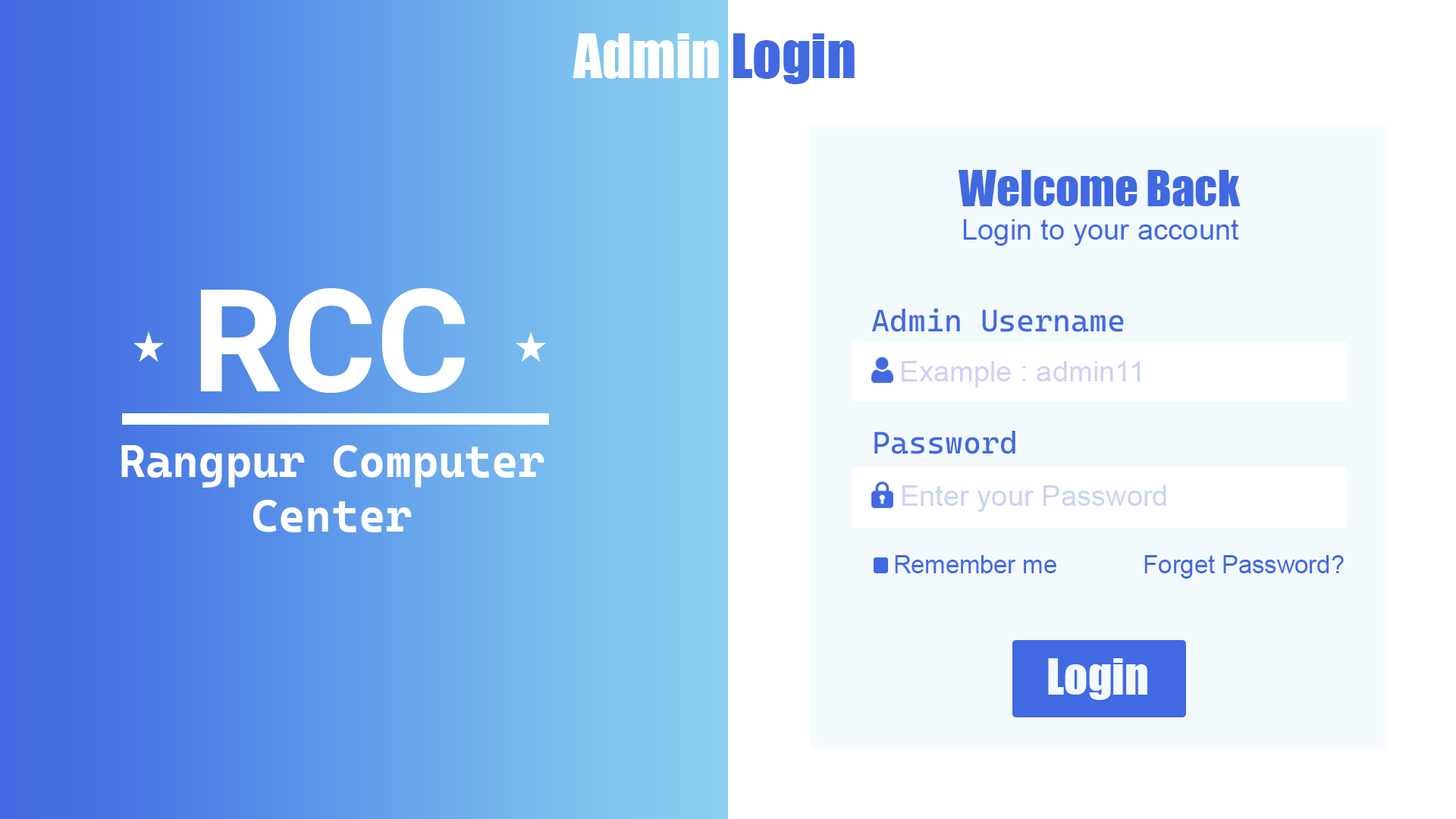
<style>
.page{position:relative;width:1456px;height:819px;background:#ffffff}
.page>*{position:absolute;margin:0}
.t1{font:46.1px "Impact";color:#4169e1}
.t2{font:29px "ArialMT";color:#4169e1}
.t3{font:142.8px "Roboto-Bold";color:#ffffff}
.t4{font:31px "CascadiaCode-Roman";color:#4169e1}
.t5{font:28.9px "ArialMT";color:#cad3f5}
.t6{font:45.4px "CascadiaCodeRoman-Bold";color:#ffffff}
.t7{font:24.8px "ArialMT";color:#4169e1}
.t8{font:46.4px "Impact";color:#f3fafd}
</style>
<div class="page">
<p class="t1" style="left:959px;top:170px;width:282px;height:36px">Welcome Back</p>
<p class="t2" style="left:963px;top:219px;width:276px;height:27px">Login to your account</p>
<p class="t3" style="left:200px;top:288px;width:266px;height:105px">RCC</p>
<p class="t4" style="left:872px;top:308px;width:252px;height:24px">Admin Username</p>
<p class="t5" style="left:902px;top:361px;width:239px;height:27px">Example : admin11</p>
<p class="t4" style="left:874px;top:431px;width:141px;height:23px">Password</p>
<p class="t6" style="left:121px;top:445px;width:423px;height:87px;text-align:center">Rangpur Computer<br>Center</p>
<p class="t5" style="left:902px;top:485px;width:264px;height:27px">Enter your Password</p>
<p class="t7" style="left:895px;top:555px;width:161px;height:18px">Remember me</p>
<p class="t7" style="left:1144px;top:555px;width:200px;height:24px">Forget Password?</p>
<p class="t8" style="left:1048px;top:658px;width:99px;height:42px">Login</p>
</div>
